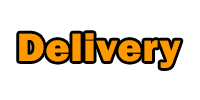
<style>
.page{position:relative;width:200px;height:100px;background:#ffffff}
.page>*{position:absolute;margin:0}
.t1{font:40.6px "FranklinGothic-Heavy";letter-spacing:0.025em;color:#ff8400}
</style>
<div class="page">
<p class="t1" style="left:19px;top:33px;width:162px;height:35px">Delivery</p>
</div>
